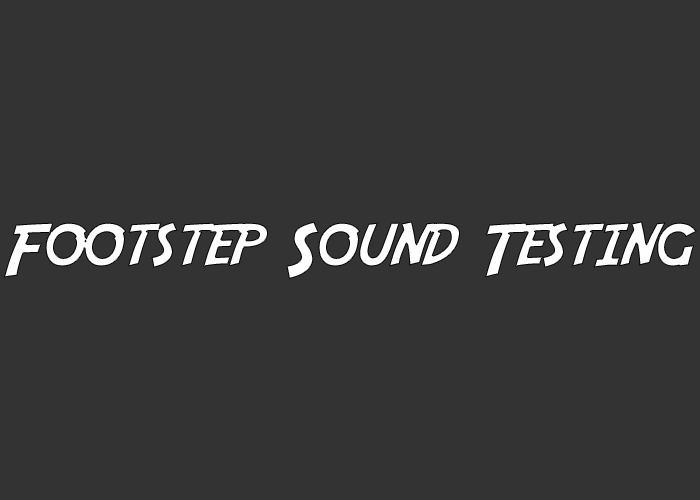
<style>
.page{position:relative;width:700px;height:500px;background:#333333}
.page>*{position:absolute;margin:0}
.t1{font:73px "Adventure";color:#fffefe}
</style>
<div class="page">
<p class="t1" style="left:4px;top:221px;width:693px;height:58px">Footstep Sound Testing</p>
</div>
